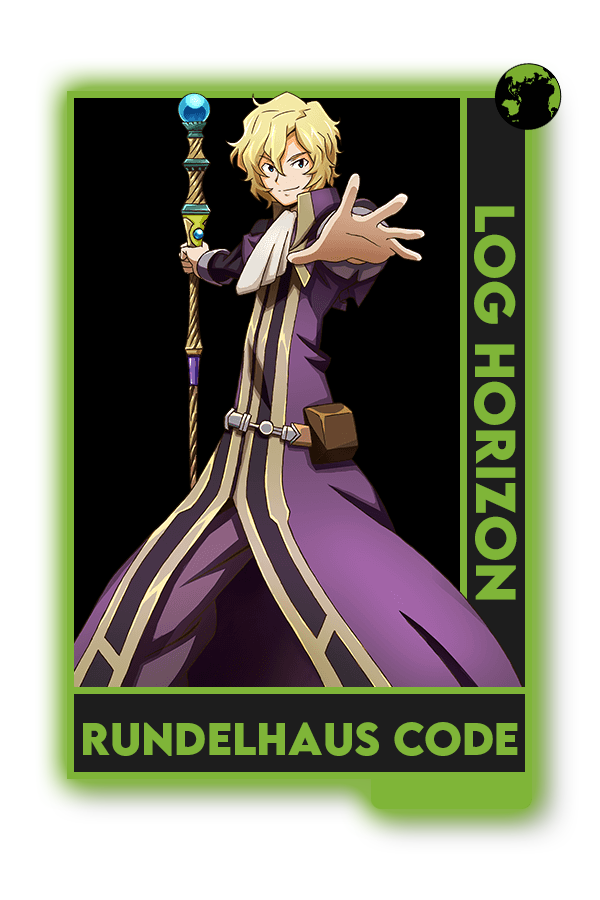
<style>
.page{position:relative;width:600px;height:900px;background:#ffffff}
.page>*{position:absolute;margin:0}
.t1{font:50px "LEMONMILK-Bold";color:#7fad41}
.t2{font:40.6px "LEMONMILK-Bold";color:#7fad41}
</style>
<div class="page">
<p class="t1" style="left:474px;top:206px;width:43px;height:394px;rotate:90deg">Log Horizon</p>
<p class="t2" style="left:83px;top:722px;width:435px;height:34px">Rundelhaus Code</p>
</div>
